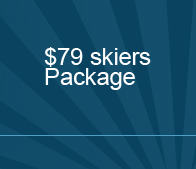
<style>
.page{position:relative;width:196px;height:169px;background:#0a4360}
.page>*{position:absolute;margin:0}
.t1{font:24px/20px "ArialMT";letter-spacing:-0.01em;color:#ffffff}
</style>
<div class="page">
<p class="t1" style="left:44px;top:47px;width:107px;height:43px">$79 skiers<br>Package</p>
</div>
